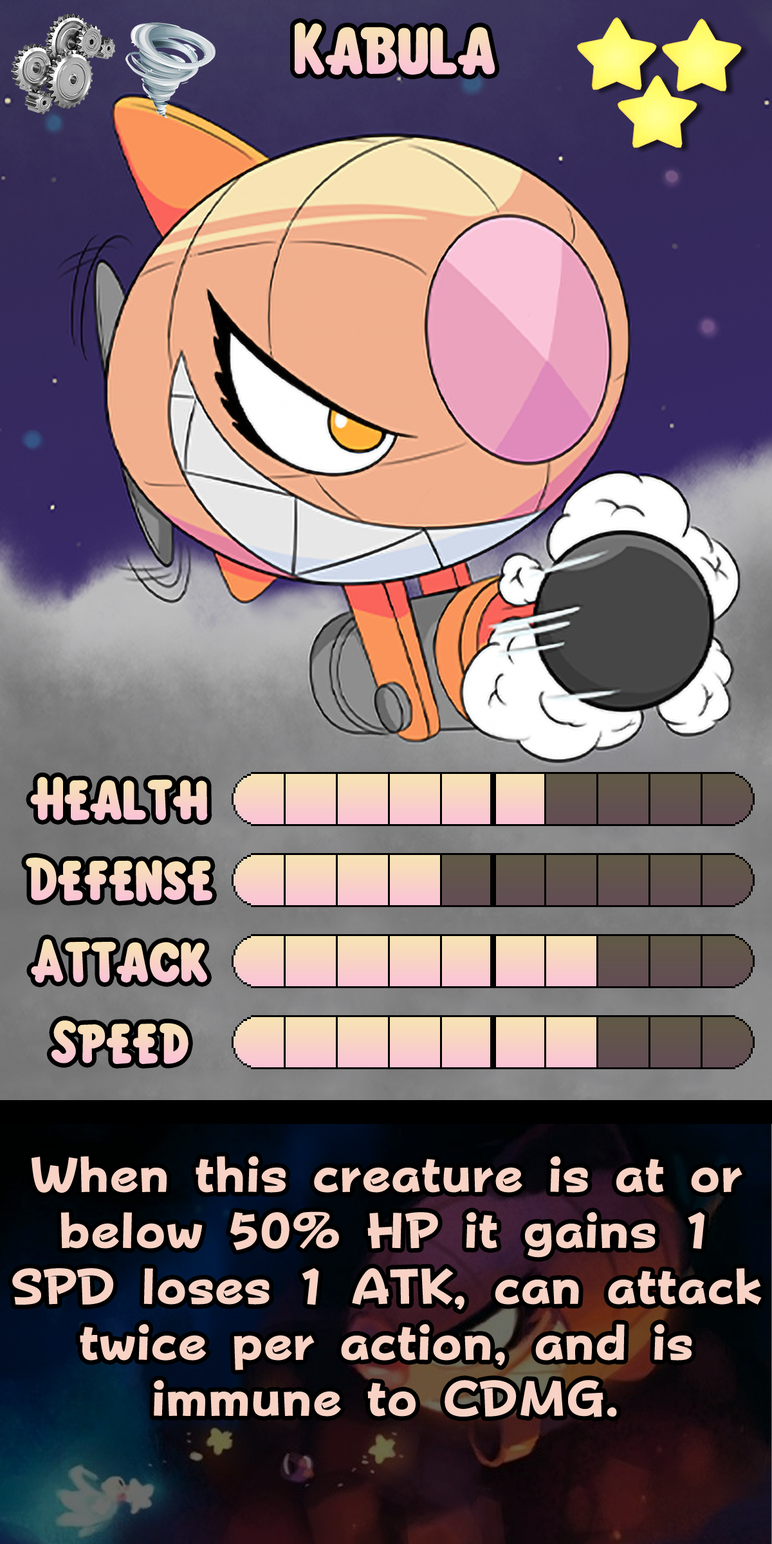
<style>
.page{position:relative;width:772px;height:1544px}
.page>*{position:absolute;margin:0}
.t1{font:110px "KirbyClassic";color:#f9d0c9}
.t2{font:92.7px "KirbyClassic";color:#f9d2c6}
.t3{font:92.7px "KirbyClassic";color:#f8d3c5}
.t4{font:92.7px "KirbyClassic";color:#f8d4c4}
.t5{font:84.9px/56px "FOTPopHappinessStrp-ExtraBold";color:#f8d3c5}
</style>
<div class="page">
<p class="t1" style="left:294px;top:23px;width:201px;height:52px">Kabula</p>
<p class="t2" style="left:30px;top:777px;width:178px;height:44px">Health</p>
<p class="t3" style="left:26px;top:858px;width:186px;height:44px">Defense</p>
<p class="t2" style="left:31px;top:939px;width:176px;height:44px">Attack</p>
<p class="t4" style="left:51px;top:1021px;width:138px;height:43px">Speed</p>
<p class="t5" style="left:12px;top:1156px;width:750px;height:262px;text-align:center">When this creature is at or below 50% HP it gains 1 SPD loses 1 ATK, can attack twice per action, and is immune to CDMG.</p>
</div>
